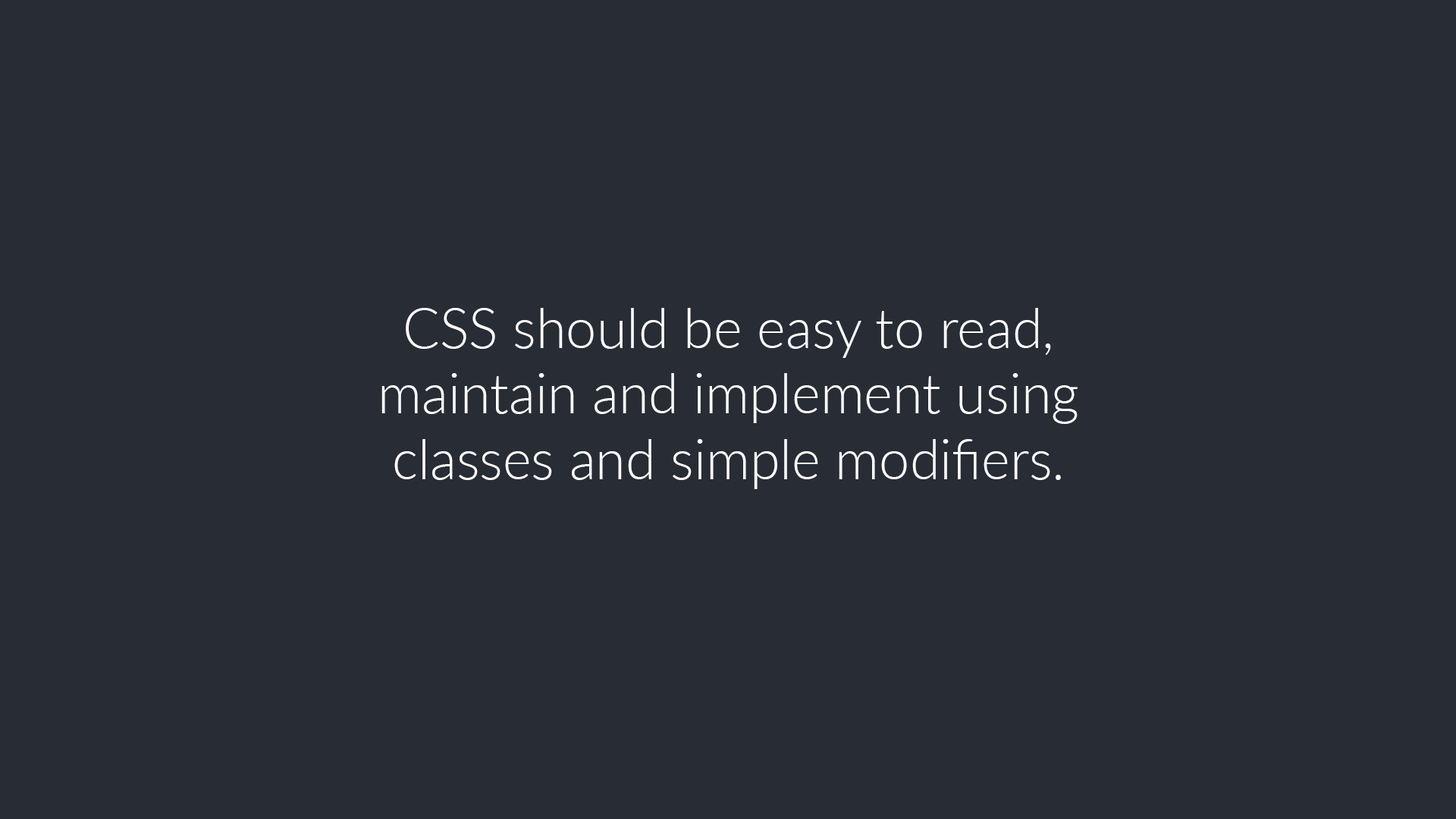
<style>
.page{position:relative;width:1456px;height:819px;background:#282c35}
.page>*{position:absolute;margin:0}
.t1{font:54.6px "Lato-Light";color:#ffffff}
</style>
<div class="page">
<p class="t1" style="left:381px;top:308px;width:697px;height:181px;text-align:center">CSS should be easy to read, maintain and implement using classes and simple modifiers.</p>
</div>
